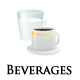
<style>
.page{position:relative;width:80px;height:80px;background:#ffffff}
.page>*{position:absolute;margin:0}
.t1{font:12px "TrajanPro-Regular";letter-spacing:-0.035em;color:#000000;font-weight:bold}
</style>
<div class="page">
<p class="t1" style="left:6px;top:64px;width:66px;height:11px">Beverages</p>
</div>
